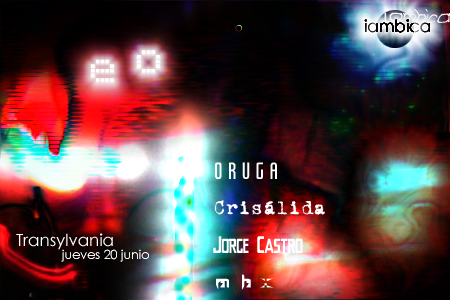
<style>
.page{position:relative;width:450px;height:300px}
.page>*{position:absolute;margin:0}
.t1{font:37.5px "Ticker";letter-spacing:0.475em;color:#ffffff}
.t2{font:22.9px "Tangerine-XCnTim2";color:#ffffff}
.t3{font:20.8px "VTCorona";color:#ffffff}
.t4{font:16.7px "CenturyGothic";color:#ffffff}
.t5{font:20.8px "Chyelovek";color:#ffffff}
.t6{font:12.5px "CenturyGothic";color:#ffffff}
.t7{font:25px "Sprutfest";color:#ffffff}
</style>
<div class="page">
<p class="t1" style="left:91px;top:50px;width:69px;height:32px">eO</p>
<p class="t2" style="left:215px;top:162px;width:62px;height:17px">o  r  u  g  a</p>
<p class="t3" style="left:214px;top:200px;width:111px;height:15px">Crisálida</p>
<p class="t4" style="left:16px;top:233px;width:97px;height:17px">Transylvania</p>
<p class="t5" style="left:213px;top:236px;width:90px;height:17px">Jorge Castro</p>
<p class="t6" style="left:61px;top:249px;width:88px;height:13px">jueves 20 junio</p>
<p class="t7" style="left:216px;top:274px;width:58px;height:16px">m h x</p>
</div>
